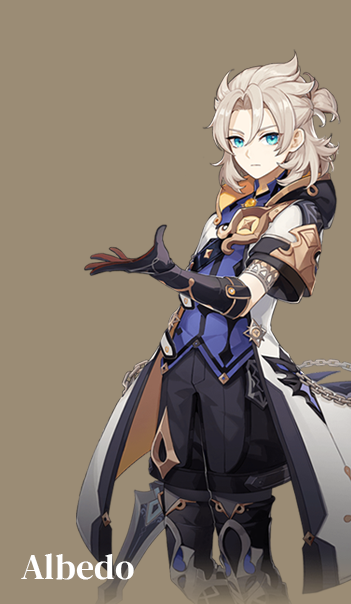
<style>
.page{position:relative;width:351px;height:604px;background:#9b8c75}
.page>*{position:absolute;margin:0}
.t1{font:36.4px "DMSerifText-Regular";color:#ffffff}
</style>
<div class="page">
<p class="t1" style="left:21px;top:553px;width:113px;height:27px">Albedo</p>
</div>
